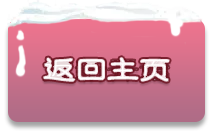
<style>
.page{position:relative;width:213px;height:132px}
.page>*{position:absolute;margin:0}
.t1{font:32px "Jtiejinlisu";color:#ffffff}
</style>
<div class="page">
<p class="t1" style="left:44px;top:58px;width:125px;height:23px">返回主页</p>
</div>
